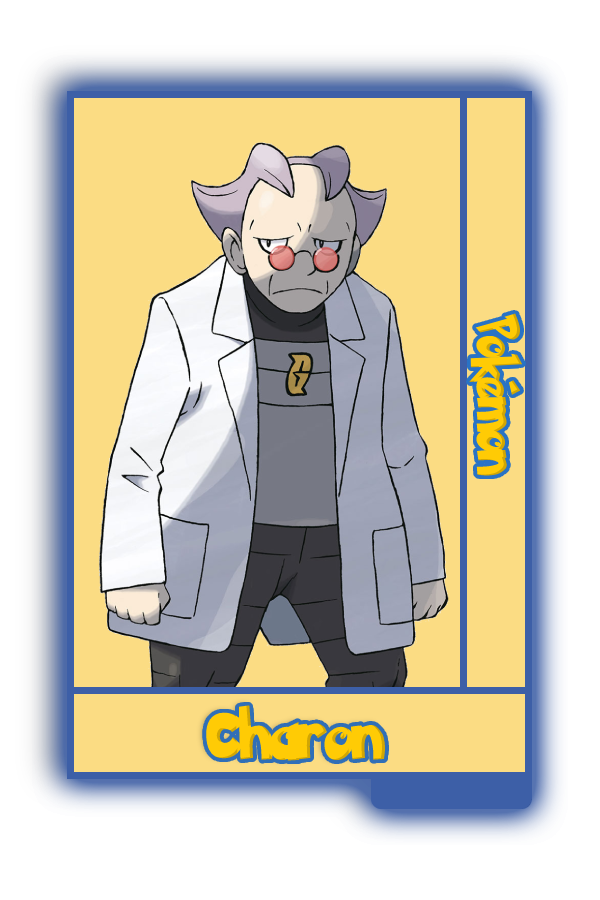
<style>
.page{position:relative;width:600px;height:900px;background:#fbdc83}
.page>*{position:absolute;margin:0}
.t1{font:48.8px "PokemonSolidNormal";color:#ffcb05;scale:0.8 1}
.t2{font:56.6px "PokemonSolidNormal";color:#ffcb05;scale:0.92 1}
</style>
<div class="page">
<p class="t1" style="left:469px;top:313px;width:54px;height:163px;rotate:90deg">Pokémon</p>
<p class="t2" style="left:206px;top:705px;width:180px;height:56px">Charon</p>
</div>
